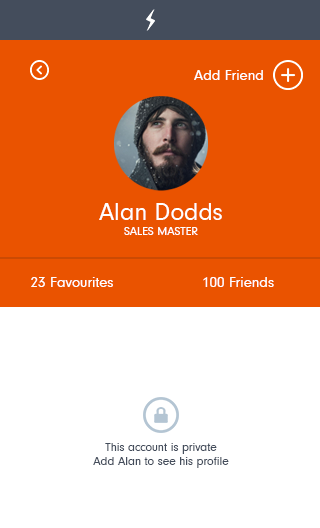
<style>
.page{position:relative;width:320px;height:528px;background:#ea5300}
.page>*{position:absolute;margin:0}
.t1{font:15px "ø";color:#ffffff}
.t2{font:25px "ø";color:#ffffff}
.t3{font:12px "ø";color:#ffffff;text-transform:uppercase}
.t4{font:12px "ø";color:#444d5c}
</style>
<div class="page">
<p class="t1" style="left:194px;top:70px;width:69px;height:10px">Add Friend</p>
<p class="t2" style="left:99px;top:203px;width:123px;height:17px">Alan Dodds</p>
<p class="t3" style="left:124px;top:227px;width:74px;height:8px">Sales Master</p>
<p class="t1" style="left:31px;top:277px;width:82px;height:10px">23 Favourites</p>
<p class="t1" style="left:203px;top:277px;width:71px;height:10px">100 Friends</p>
<p class="t4" style="left:93px;top:443px;width:136px;height:25px;text-align:center">This account is private<br>Add Alan to see his profile</p>
</div>
